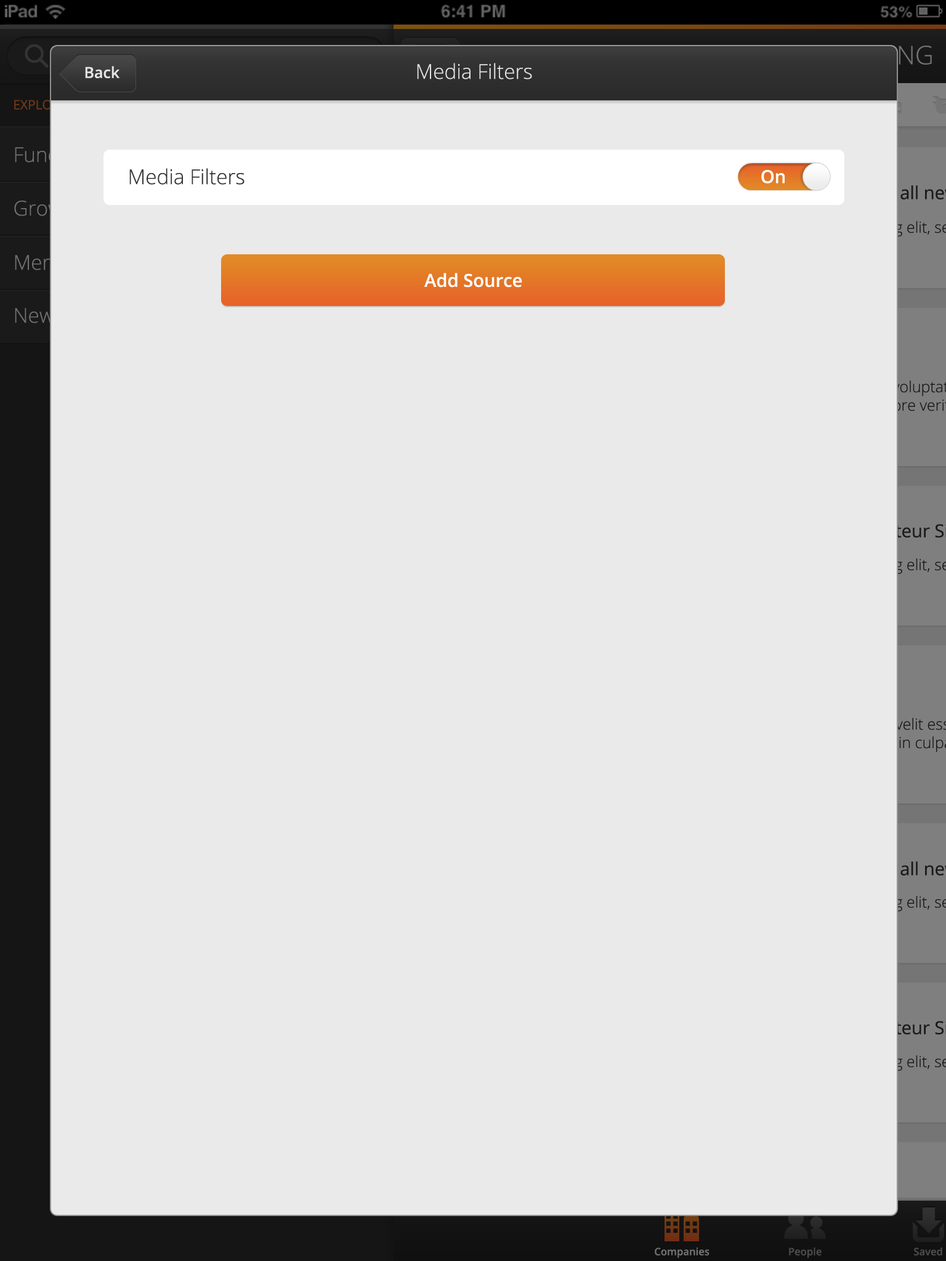
<style>
.page{position:relative;width:946px;height:1261px;background:#eaeaea}
.page>*{position:absolute;margin:0}
.t1{font:15.4px "OpenSans-Semibold";color:#e5e5e5}
.t2{font:20.5px "OpenSans-Light";color:#e5e5e5}
.t3{font:20.5px "OpenSans-Light";color:#343434}
.t4{font:18px "OpenSans-Semibold";color:#ffffff}
</style>
<div class="page">
<p class="t1" style="left:85px;top:66px;width:35px;height:12px">Back</p>
<p class="t2" style="left:417px;top:63px;width:115px;height:16px">Media Filters</p>
<p class="t3" style="left:129px;top:168px;width:115px;height:17px">Media Filters</p>
<p class="t4" style="left:761px;top:170px;width:23px;height:13px">On</p>
<p class="t4" style="left:424px;top:273px;width:98px;height:15px">Add Source</p>
</div>
